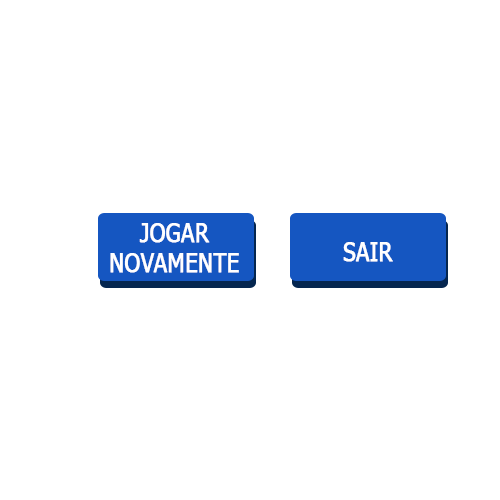
<style>
.page{position:relative;width:500px;height:500px;background:#ffffff}
.page>*{position:absolute;margin:0}
.t1{font:25px "Tahoma";color:#ffffff;font-weight:bold;scale:0.88 1}
.t2{font:25.1px "Tahoma";color:#ffffff;font-weight:bold;scale:0.88 1}
</style>
<div class="page">
<p class="t1" style="left:110px;top:223px;width:129px;height:50px;text-align:center">JOGAR <br>NOVAMENTE</p>
<p class="t2" style="left:343px;top:242px;width:50px;height:20px">SAIR</p>
</div>
